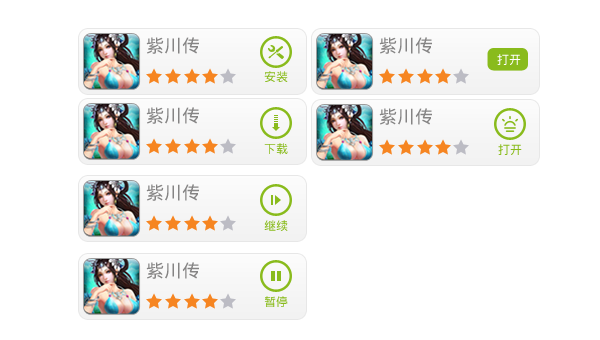
<style>
.page{position:relative;width:600px;height:340px;background:#ffffff}
.page>*{position:absolute;margin:0}
.t1{font:18px "DroidSansFallback";color:#858484}
.t2{font:12px "DroidSansFallback";color:#fefefe}
.t3{font:12px "DroidSansFallback";color:#89bb1c}
</style>
<div class="page">
<p class="t1" style="left:146px;top:37px;width:53px;height:17px">紫川传</p>
<p class="t1" style="left:379px;top:37px;width:53px;height:17px">紫川传</p>
<p class="t2" style="left:497px;top:54px;width:24px;height:11px">打开</p>
<p class="t3" style="left:264px;top:71px;width:24px;height:11px">安装</p>
<p class="t1" style="left:146px;top:107px;width:53px;height:17px">紫川传</p>
<p class="t1" style="left:379px;top:108px;width:53px;height:17px">紫川传</p>
<p class="t3" style="left:264px;top:143px;width:24px;height:12px">下载</p>
<p class="t3" style="left:498px;top:144px;width:24px;height:11px">打开</p>
<p class="t1" style="left:146px;top:184px;width:53px;height:17px">紫川传</p>
<p class="t3" style="left:264px;top:220px;width:24px;height:11px">继续</p>
<p class="t1" style="left:146px;top:262px;width:53px;height:17px">紫川传</p>
<p class="t3" style="left:264px;top:296px;width:24px;height:11px">暂停</p>
</div>
